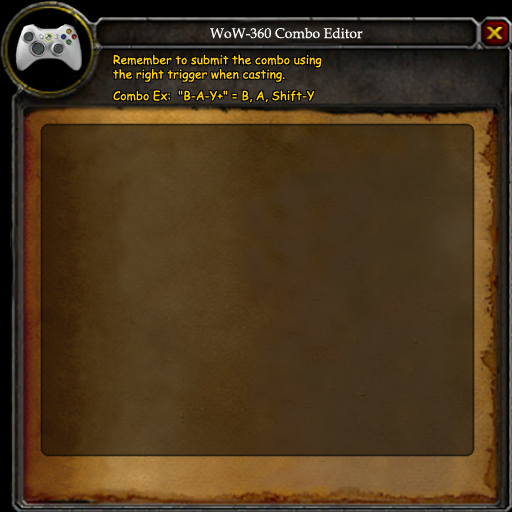
<style>
.page{position:relative;width:512px;height:512px}
.page>*{position:absolute;margin:0}
.t1{font:14px "BookAntiqua";color:#ffffff}
.t2{font:12px "ComicSansMS";color:#ffd200}
</style>
<div class="page">
<p class="t1" style="left:210px;top:27px;width:153px;height:12px">WoW-360 Combo Editor</p>
<p class="t2" style="left:113px;top:54px;width:209px;height:49px">Remember to submit the combo using<br>the right trigger when casting.<br><br>Combo Ex:  "B-A-Y+" = B, A, Shift-Y</p>
</div>
